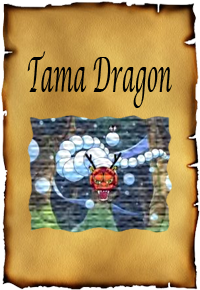
<style>
.page{position:relative;width:200px;height:290px}
.page>*{position:absolute;margin:0}
.t1{font:48px "LucidaCalligraphy-Italic";color:#000000;scale:0.4 1}
</style>
<div class="page">
<p class="t1" style="left:27px;top:51px;width:145px;height:57px">Tama Dragon</p>
</div>
